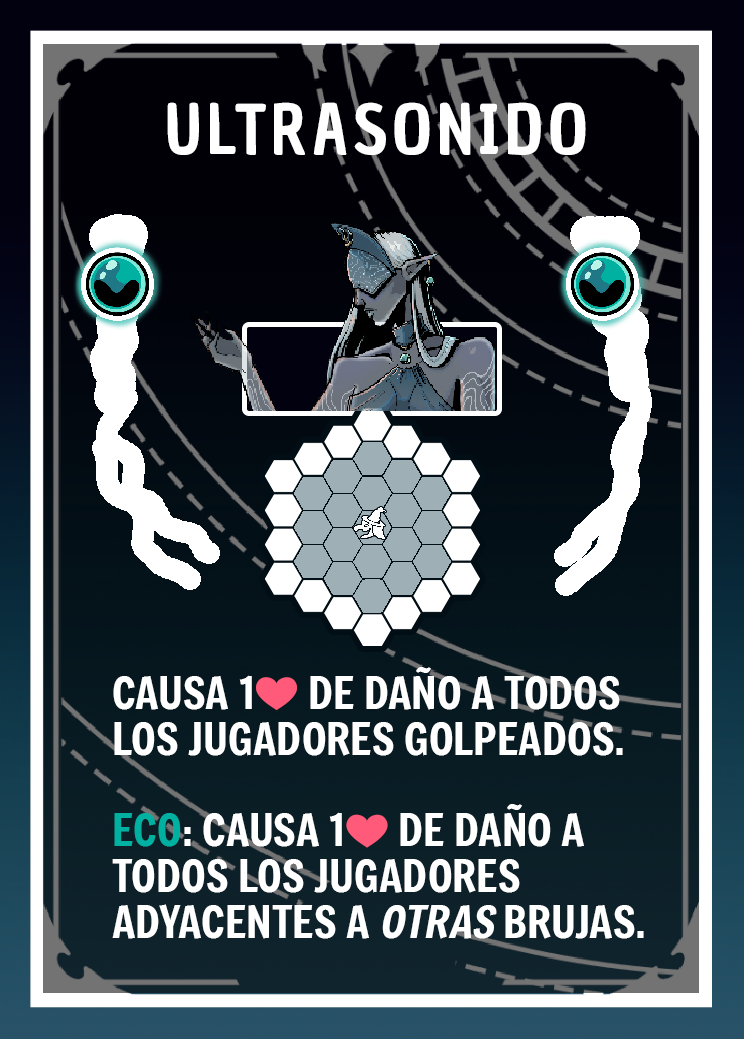
<style>
.page{position:relative;width:744px;height:1039px}
.page>*{position:absolute;margin:0}
.t1{font:66.7px "ChauPhilomeneOne-Regular";letter-spacing:0.075em;color:#ffffff}
.t2{font:43.7px/45.8px "Freeman-Regular";color:#ffffff}
.t3{font:43.7px/45.8px "EmojiOneColor";color:#ffffff}
.t4{font:43.7px/45.8px "Freeman-Regular";color:#00b1a2}
.t5{font:43.7px/45.8px "Freeman-Regular";color:#ffffff;font-style:italic}
</style>
<div class="page">
<p class="t1" style="left:167px;top:102px;width:419px;height:53px">ULTRASONIDO</p>
<p class="t2" style="left:112px;top:667px;width:532px;height:272px">CAUSA 1<span class="t3">❤️</span> DE DAÑO A TODOS LOS JUGADORES GOLPEADOS. <br><span class="t4"><br>ECO</span>: CAUSA 1<span class="t3">❤️</span> DE DAÑO A TODOS LOS JUGADORES ADYACENTES A <span class="t5">OTRAS </span>BRUJAS.</p>
</div>
